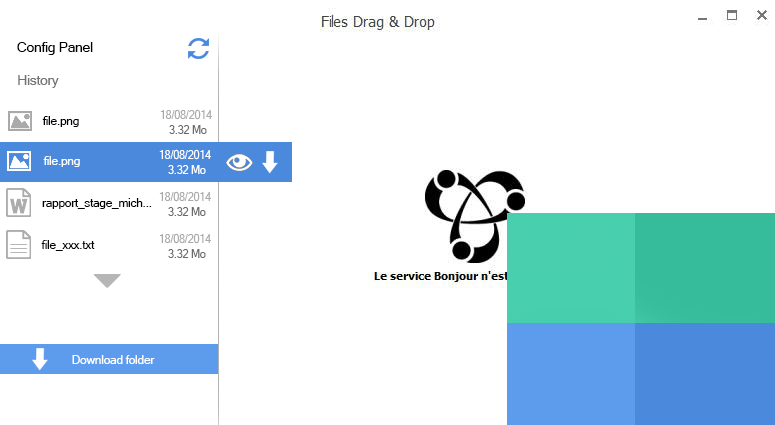
<style>
.page{position:relative;width:775px;height:425px;background:#ffffff}
.page>*{position:absolute;margin:0}
.t1{font:14px "MicrosoftSansSerif";letter-spacing:-0.025em;color:#000000}
.t2{font:14px "MicrosoftSansSerif";letter-spacing:-0.025em;color:#737373}
.t3{font:11px "MicrosoftSansSerif";letter-spacing:-0.025em;color:#aaaaaa}
.t4{font:12px "MicrosoftSansSerif";letter-spacing:-0.025em;color:#000000}
.t5{font:11px "MicrosoftSansSerif";letter-spacing:-0.025em;color:#6b6b6b}
.t6{font:11px "MicrosoftSansSerif";letter-spacing:-0.025em;color:#fefefe}
.t7{font:12px "MicrosoftSansSerif";letter-spacing:-0.025em;color:#fefefe}
.t8{font:11px "MicrosoftSansSerif";letter-spacing:-0.025em;color:#ffffff}
.t9{font:12px "MicrosoftSansSerif";letter-spacing:-0.025em;color:#ffffff}
</style>
<div class="page">
<p class="t1" style="left:17px;top:42px;width:76px;height:13px">Config Panel</p>
<p class="t2" style="left:18px;top:75px;width:41px;height:13px">History</p>
<p class="t3" style="left:160px;top:109px;width:52px;height:11px">18/08/2014</p>
<p class="t4" style="left:42px;top:116px;width:37px;height:11px">file.png</p>
<p class="t5" style="left:169px;top:125px;width:38px;height:9px">3.32 Mo</p>
<p class="t6" style="left:159px;top:149px;width:52px;height:11px">18/08/2014</p>
<p class="t7" style="left:43px;top:156px;width:37px;height:11px">file.png</p>
<p class="t8" style="left:168px;top:165px;width:38px;height:9px">3.32 Mo</p>
<p class="t4" style="left:42px;top:198px;width:110px;height:11px">rapport_stage_mich...</p>
<p class="t3" style="left:159px;top:191px;width:52px;height:11px">18/08/2014</p>
<p class="t5" style="left:168px;top:207px;width:38px;height:9px">3.32 Mo</p>
<p class="t3" style="left:159px;top:233px;width:52px;height:11px">18/08/2014</p>
<p class="t4" style="left:41px;top:240px;width:54px;height:11px">file_xxx.txt</p>
<p class="t5" style="left:168px;top:249px;width:38px;height:9px">3.32 Mo</p>
<p class="t9" style="left:72px;top:355px;width:83px;height:9px">Download folder</p>
</div>
